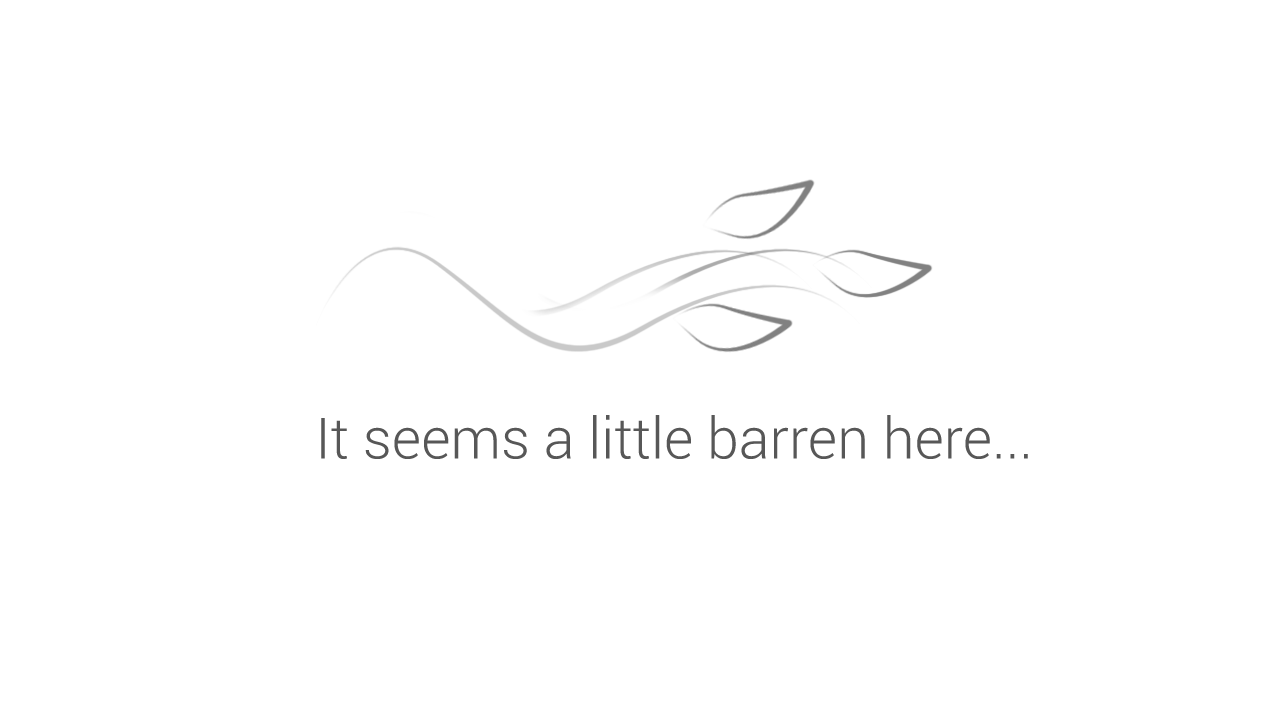
<style>
.page{position:relative;width:1280px;height:720px;background:#ffffff}
.page>*{position:absolute;margin:0}
.t1{font:57px "Roboto-Light";color:#575757}
</style>
<div class="page">
<p class="t1" style="left:321px;top:415px;width:707px;height:44px">It seems a little barren here...</p>
</div>
